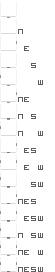
<style>
.page{position:relative;width:55px;height:272px;background:#ffffff}
.page>*{position:absolute;margin:0}
.t1{font:9px "VisitorTT1BRK";letter-spacing:0.2em;color:#5e5e5e}
</style>
<div class="page">
<p class="t1" style="left:18px;top:29px;width:5px;height:5px">n</p>
<p class="t1" style="left:24px;top:46px;width:5px;height:5px">e</p>
<p class="t1" style="left:31px;top:63px;width:5px;height:5px">s</p>
<p class="t1" style="left:38px;top:80px;width:5px;height:5px">w</p>
<p class="t1" style="left:18px;top:97px;width:11px;height:5px">ne</p>
<p class="t1" style="left:18px;top:114px;width:18px;height:5px">n s</p>
<p class="t1" style="left:18px;top:131px;width:25px;height:5px">n  w</p>
<p class="t1" style="left:24px;top:148px;width:12px;height:5px">es</p>
<p class="t1" style="left:24px;top:165px;width:19px;height:5px">e w</p>
<p class="t1" style="left:31px;top:182px;width:12px;height:5px">sw</p>
<p class="t1" style="left:18px;top:199px;width:18px;height:5px">nes</p>
<p class="t1" style="left:24px;top:216px;width:19px;height:5px">esw</p>
<p class="t1" style="left:18px;top:233px;width:25px;height:5px">n sw</p>
<p class="t1" style="left:18px;top:250px;width:25px;height:5px">ne w</p>
<p class="t1" style="left:18px;top:267px;width:25px;height:5px">nesw</p>
</div>
